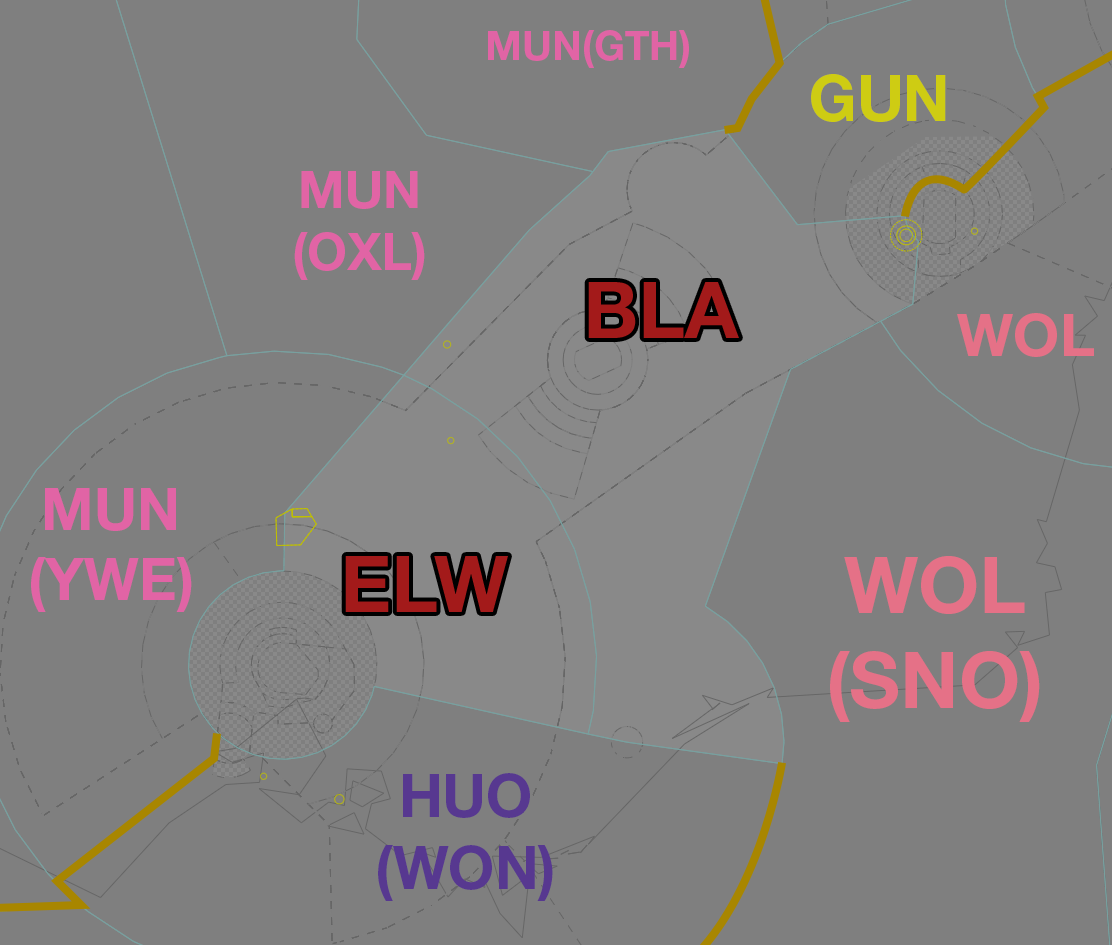
<style>
.page{position:relative;width:1112px;height:945px;background:#7f7f7f}
.page>*{position:absolute;margin:0}
.t1{font:40.6px "HelveticaNeueLTStd-Bd";color:#e164a5}
.t2{font:63.9px "HelveticaNeueLTStd-Bd";color:#cecc13}
.t3{font:51.6px "HelveticaNeueLTStd-Bd";color:#e164a5}
.t4{font:78.8px "HelveticaNeueLTStd-Bd";color:#a31a1a}
.t5{font:59.2px "HelveticaNeueLTStd-Bd";color:#e57187}
.t6{font:58.2px "HelveticaNeueLTStd-Bd";color:#e164a5}
.t7{font:78.8px "HelveticaNeueLTStd-Bd";color:#e57187}
.t8{font:59.6px "HelveticaNeueLTStd-Bd";color:#573890}
</style>
<div class="page">
<p class="t1" style="left:488px;top:30px;width:201px;height:38px">MUN(GTH)</p>
<p class="t2" style="left:811px;top:74px;width:135px;height:48px">GUN</p>
<p class="t3" style="left:294px;top:171px;width:131px;height:109px;text-align:center">MUN<br>(OXL)</p>
<p class="t4" style="left:588px;top:282px;width:151px;height:56px">BLA</p>
<p class="t5" style="left:957px;top:313px;width:137px;height:44px">WOL</p>
<p class="t6" style="left:31px;top:488px;width:161px;height:124px;text-align:center">MUN<br>(YWE)</p>
<p class="t4" style="left:345px;top:556px;width:163px;height:56px">ELW</p>
<p class="t7" style="left:830px;top:556px;width:210px;height:166px;text-align:center">WOL<br>(SNO)</p>
<p class="t8" style="left:378px;top:773px;width:175px;height:128px;text-align:center">HUO<br>(WON)</p>
</div>
